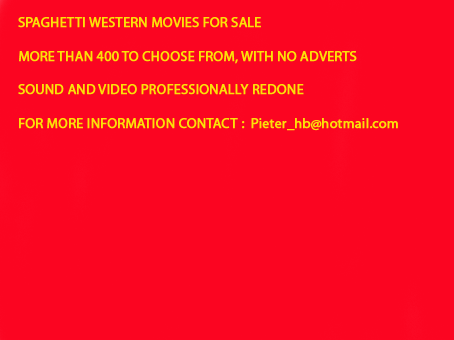
<style>
.page{position:relative;width:454px;height:340px;background:#fb0521}
.page>*{position:absolute;margin:0}
.t1{font:14px "MyriadPro-Regular";color:#fbe107;font-weight:bold}
</style>
<div class="page">
<p class="t1" style="left:18px;top:17px;width:380px;height:114px">SPAGHETTI WESTERN MOVIES FOR SALE<br><br>MORE THAN 400 TO CHOOSE FROM, WITH NO ADVERTS<br><br>SOUND AND VIDEO PROFESSIONALLY REDONE<br><br>FOR MORE INFORMATION CONTACT :  Pieter_hb@hotmail.com</p>
</div>
